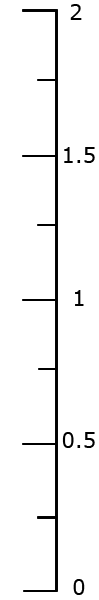
<style>
.page{position:relative;width:99px;height:600px;background:#ffffff}
.page>*{position:absolute;margin:0}
.t1{font:21.2px "Verdana";color:#000000}
</style>
<div class="page">
<p class="t1" style="left:70px;top:4px;width:12px;height:16px">2</p>
<p class="t1" style="left:64px;top:147px;width:31px;height:16px">1.5</p>
<p class="t1" style="left:75px;top:290px;width:9px;height:16px">1</p>
<p class="t1" style="left:62px;top:432px;width:33px;height:16px">0.5</p>
<p class="t1" style="left:73px;top:579px;width:12px;height:16px">0</p>
</div>
